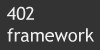
<style>
.page{position:relative;width:100px;height:50px;background:#333333}
.page>*{position:absolute;margin:0}
.t1{font:18px "TrebuchetMS";color:#eeeeee}
</style>
<div class="page">
<p class="t1" style="left:7px;top:6px;width:87px;height:36px">402<br>framework</p>
</div>
